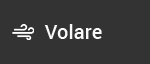
<style>
.page{position:relative;width:150px;height:64px;background:#333333}
.page>*{position:absolute;margin:0}
.t1{font:20px "Roboto-Medium";letter-spacing:0.005em;color:#f9f9f9}
</style>
<div class="page">
<p class="t1" style="left:44px;top:24px;width:58px;height:15px">Volare</p>
</div>
